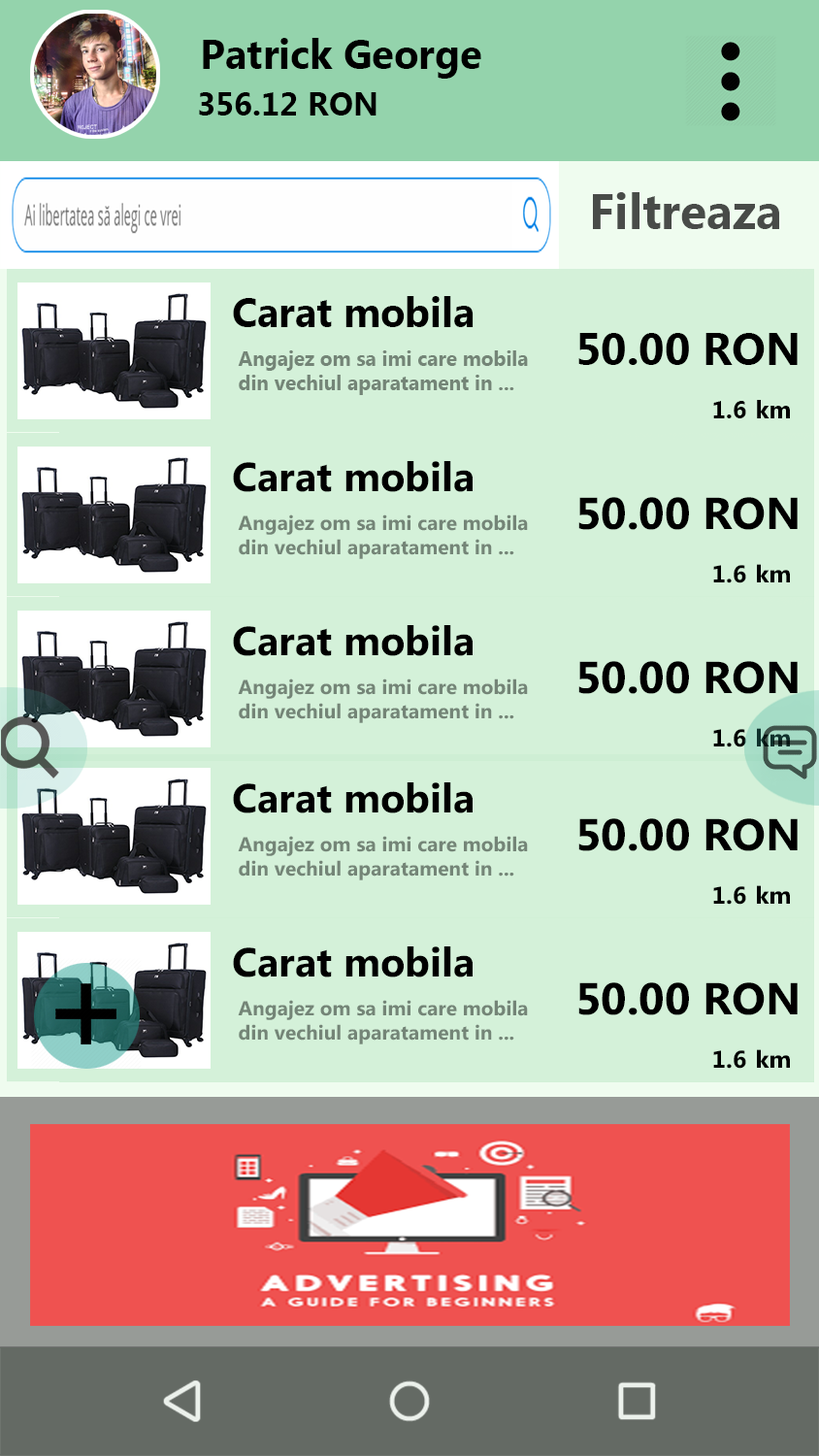
<style>
.page{position:relative;width:819px;height:1456px;background:#d4f1d9}
.page>*{position:absolute;margin:0}
.t1{font:40.4px "MicrosoftNewTaiLue-Bold";color:#000000}
.t2{font:32.4px "MicrosoftNewTaiLue-Bold";color:#000000}
.t3{font:48.5px "MicrosoftNewTaiLue-Bold";color:#484b48}
.t4{font:44.6px "MicrosoftNewTaiLue-Bold";color:#000000}
.t5{font:20.2px "MicrosoftNewTaiLue-Bold";color:#748577}
.t6{font:24.3px "MicrosoftNewTaiLue-Bold";color:#000000}
.t7{font:40.5px "MicrosoftNewTaiLue-Bold";color:#000000}
.t8{font:24.3px "MicrosoftNewTaiLue-Bold"}
</style>
<div class="page">
<p class="t1" style="left:203px;top:38px;width:278px;height:41px">Patrick George</p>
<p class="t2" style="left:199px;top:92px;width:178px;height:23px">356.12 RON</p>
<p class="t3" style="left:593px;top:192px;width:186px;height:37px">Filtreaza</p>
<p class="t1" style="left:233px;top:296px;width:241px;height:31px">Carat mobila</p>
<p class="t4" style="left:578px;top:333px;width:220px;height:32px">50.00 RON</p>
<p class="t5" style="left:238px;top:350px;width:290px;height:45px">Angajez om sa imi care mobila din vechiul aparatament in ...</p>
<p class="t6" style="left:713px;top:400px;width:77px;height:18px">1.6 km</p>
<p class="t7" style="left:233px;top:461px;width:240px;height:31px">Carat mobila</p>
<p class="t4" style="left:578px;top:497px;width:220px;height:33px">50.00 RON</p>
<p class="t5" style="left:238px;top:514px;width:290px;height:45px">Angajez om sa imi care mobila din vechiul aparatament in ...</p>
<p class="t6" style="left:713px;top:564px;width:77px;height:19px">1.6 km</p>
<p class="t7" style="left:233px;top:625px;width:240px;height:31px">Carat mobila</p>
<p class="t4" style="left:578px;top:661px;width:220px;height:33px">50.00 RON</p>
<p class="t5" style="left:238px;top:678px;width:290px;height:45px">Angajez om sa imi care mobila din vechiul aparatament in ...</p>
<p class="t8" style="left:713px;top:728px;width:77px;height:19px">1.6 km</p>
<p class="t7" style="left:233px;top:782px;width:240px;height:31px">Carat mobila</p>
<p class="t4" style="left:578px;top:818px;width:220px;height:33px">50.00 RON</p>
<p class="t5" style="left:238px;top:836px;width:290px;height:44px">Angajez om sa imi care mobila din vechiul aparatament in ...</p>
<p class="t6" style="left:713px;top:885px;width:77px;height:20px">1.6 km</p>
<p class="t7" style="left:233px;top:946px;width:240px;height:31px">Carat mobila</p>
<p class="t4" style="left:578px;top:982px;width:220px;height:33px">50.00 RON</p>
<p class="t5" style="left:238px;top:1000px;width:290px;height:44px">Angajez om sa imi care mobila din vechiul aparatament in ...</p>
<p class="t6" style="left:713px;top:1049px;width:77px;height:20px">1.6 km</p>
</div>
